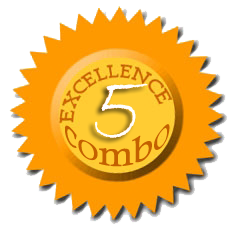
<style>
.page{position:relative;width:236px;height:234px;background:#ffffff}
.page>*{position:absolute;margin:0}
.t1{font:102.5px "BradleyHandITC";color:#fdffff;scale:0.79 1}
.t2{font:36px "CalistoMT";color:#c46100}
</style>
<div class="page">
<p class="t1" style="left:95px;top:83px;width:53px;height:55px">5</p>
<p class="t2" style="left:65px;top:124px;width:105px;height:43px">combo</p>
</div>
